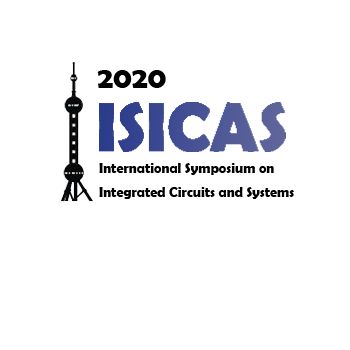
<style>
.page{position:relative;width:350px;height:350px;background:#ffffff}
.page>*{position:absolute;margin:0}
.t1{font:30px "BerlinSansFBDemi-Bold";color:#000000}
.t2{font:14px "BerlinSansFBDemi-Bold";color:#000000}
</style>
<div class="page">
<p class="t1" style="left:97px;top:70px;width:69px;height:18px">2020</p>
<p class="t2" style="left:99px;top:163px;width:195px;height:36px">International Symposium on <br>Integrated Circuits and Systems</p>
</div>
